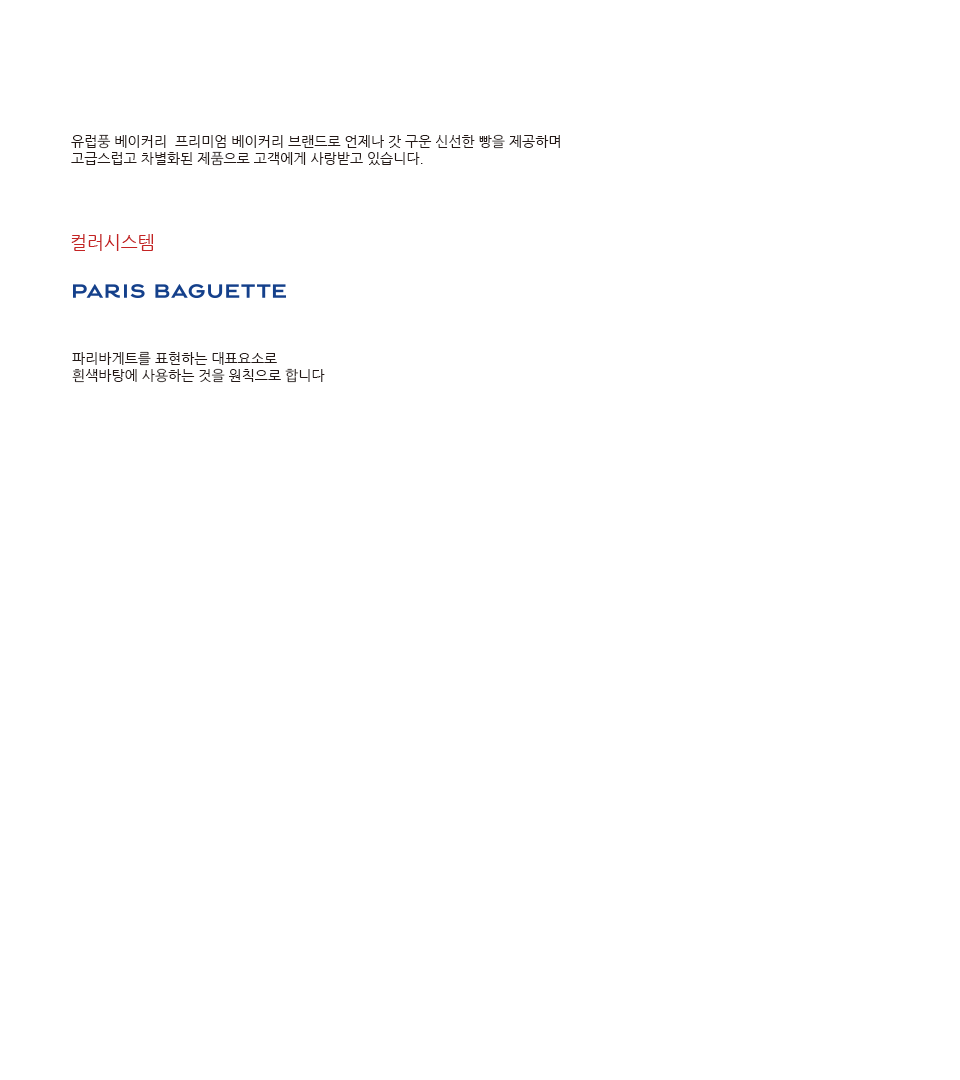
<style>
.page{position:relative;width:960px;height:1080px;background:#ffffff}
.page>*{position:absolute;margin:0}
.t1{font:14px "NanumGothic";color:#231815}
.t2{font:18px "NanumGothic";color:#c42323}
</style>
<div class="page">
<p class="t1" style="left:71px;top:134px;width:489px;height:32px">유럽풍 베이커리  프리미엄 베이커리 브랜드로 언제나 갓 구운 신선한 빵을 제공하며 <br>고급스럽고 차별화된 제품으로 고객에게 사랑받고 있습니다.</p>
<p class="t2" style="left:71px;top:234px;width:82px;height:17px">컬러시스템</p>
<p class="t1" style="left:72px;top:351px;width:253px;height:32px">파리바게트를 표현하는 대표요소로 <br>흰색바탕에 사용하는 것을 원칙으로 합니다</p>
</div>
